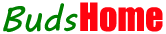
<style>
.page{position:relative;width:166px;height:34px;background:#ffffff}
.page>*{position:absolute;margin:0}
.t1{font:36px "MVBoli";color:#008000}
.t2{font:36px "Impact";color:#ff040f}
</style>
<div class="page">
<p class="t1" style="left:3px;top:3px;width:75px;height:30px">Buds</p>
<p class="t2" style="left:80px;top:2px;width:83px;height:30px">Home</p>
</div>
